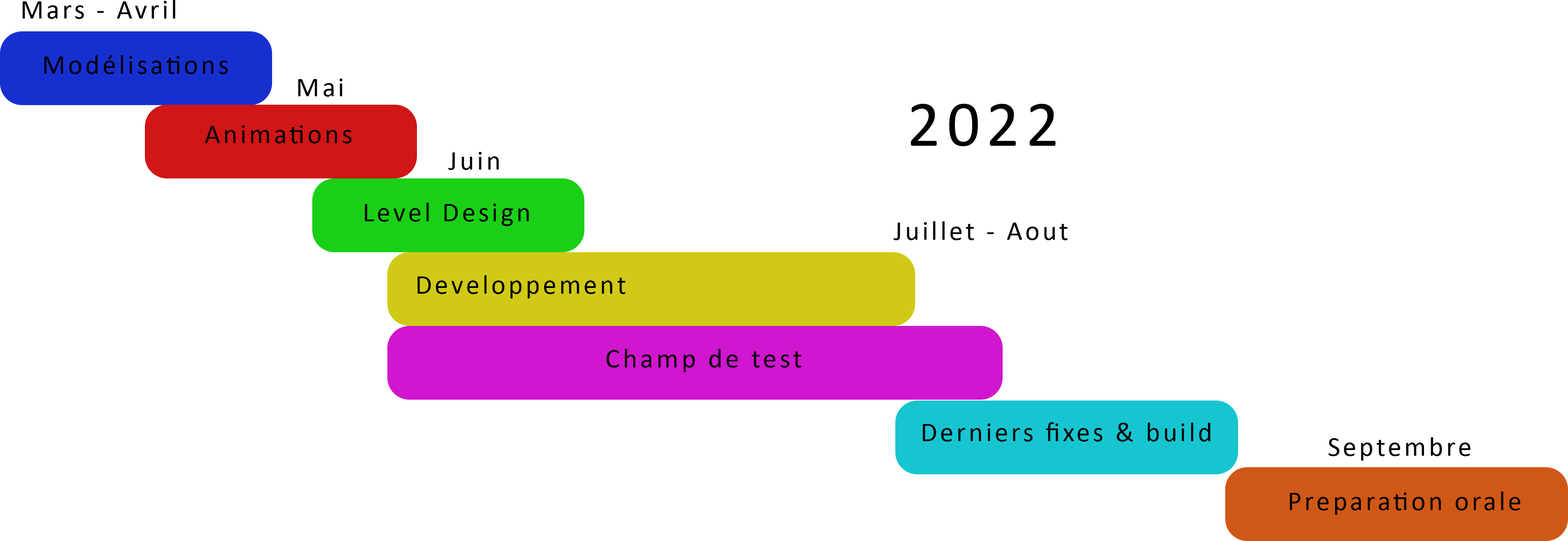
<style>
.page{position:relative;width:1568px;height:541px;background:#ffffff}
.page>*{position:absolute;margin:0}
.t1{font:27.4px "Calibri";letter-spacing:0.1em;color:#000000}
.t2{font:65.4px "Calibri";letter-spacing:0.1em;color:#000000}
</style>
<div class="page">
<p class="t1" style="left:23px;top:0px;width:152px;height:19px">Mars - Avril</p>
<p class="t1" style="left:44px;top:55px;width:184px;height:19px">Modélisations</p>
<p class="t1" style="left:298px;top:79px;width:45px;height:18px">Mai</p>
<p class="t2" style="left:911px;top:104px;width:145px;height:42px">2022</p>
<p class="t1" style="left:205px;top:125px;width:147px;height:19px">Animations</p>
<p class="t1" style="left:448px;top:152px;width:51px;height:18px">Juin</p>
<p class="t1" style="left:365px;top:203px;width:164px;height:23px">Level Design</p>
<p class="t1" style="left:894px;top:221px;width:174px;height:19px">Juillet - Aout</p>
<p class="t1" style="left:417px;top:275px;width:208px;height:24px">Developpement</p>
<p class="t1" style="left:606px;top:348px;width:195px;height:24px">Champ de test</p>
<p class="t1" style="left:923px;top:422px;width:287px;height:20px">Derniers fixes &amp; build</p>
<p class="t1" style="left:1329px;top:437px;width:141px;height:24px">Septembre</p>
<p class="t1" style="left:1290px;top:492px;width:230px;height:23px">Preparation orale</p>
</div>
